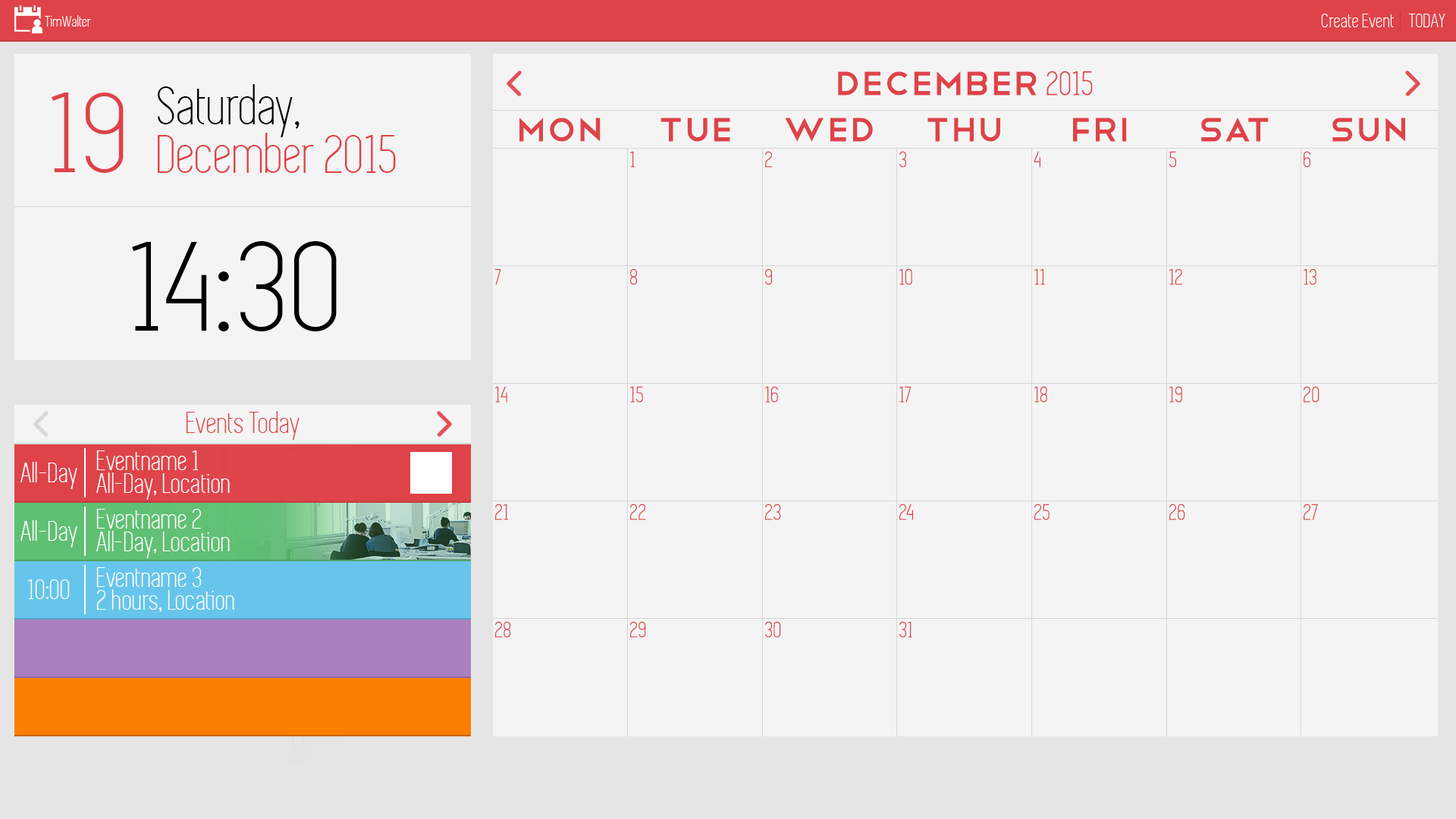
<style>
.page{position:relative;width:1456px;height:819px;background:#f4f4f4}
.page>*{position:absolute;margin:0}
.t1{font:15.6px "Simplifica";letter-spacing:0.01em;color:#ffffff}
.t2{font:20.5px "Simplifica";letter-spacing:0.01em;color:#ffffff}
.t3{font:43.6px "Telegrafico";letter-spacing:0.01em;color:#de4349}
.t4{font:35.1px "Simplifica";letter-spacing:0.01em;color:#de4349}
.t5{font:55.8px/48.5px "Simplifica";color:#de4349}
.t6{font:55.8px/48.5px "Simplifica";color:#000000}
.t7{font:117.9px "Simplifica";letter-spacing:0.01em;color:#de4349;scale:1.1 1}
.t8{font:22.9px "Simplifica";letter-spacing:0.01em;color:#de4349}
.t9{font:132.1px "Simplifica";letter-spacing:0.01em;color:#000000;scale:1.1 1}
.t10{font:30.9px "Simplifica";letter-spacing:0.01em;color:#de4349}
.t11{font:28.5px "Simplifica";letter-spacing:0.01em;color:#ffffff}
.t12{font:28.5px/23.1px "Simplifica";letter-spacing:0.01em;color:#ffffff}
</style>
<div class="page">
<p class="t1" style="left:45px;top:15px;width:46px;height:12px">TimWalter</p>
<p class="t2" style="left:1321px;top:14px;width:73px;height:13px">Create Event</p>
<p class="t2" style="left:1408px;top:14px;width:37px;height:13px">TODAY</p>
<p class="t3" style="left:838px;top:71px;width:255px;height:25px">December <span class="t4">2015</span></p>
<p class="t5" style="left:158px;top:84px;width:238px;height:89px"><span class="t6">Saturday,<br></span>December 2015</p>
<p class="t7" style="left:52px;top:93px;width:72px;height:80px">19</p>
<p class="t3" style="left:519px;top:118px;width:82px;height:24px">MON</p>
<p class="t3" style="left:660px;top:118px;width:70px;height:24px">TUE</p>
<p class="t3" style="left:785px;top:118px;width:88px;height:24px">WED</p>
<p class="t3" style="left:927px;top:118px;width:73px;height:24px">THU</p>
<p class="t3" style="left:1073px;top:118px;width:54px;height:24px">FRI</p>
<p class="t3" style="left:1201px;top:118px;width:68px;height:24px">SAT</p>
<p class="t3" style="left:1332px;top:118px;width:73px;height:24px">SUN</p>
<p class="t8" style="left:630px;top:151px;width:5px;height:17px">1</p>
<p class="t8" style="left:765px;top:151px;width:7px;height:17px">2</p>
<p class="t8" style="left:899px;top:151px;width:7px;height:17px">3</p>
<p class="t8" style="left:1034px;top:151px;width:6px;height:17px">4</p>
<p class="t8" style="left:1169px;top:151px;width:7px;height:17px">5</p>
<p class="t8" style="left:1304px;top:151px;width:6px;height:17px">6</p>
<p class="t9" style="left:132px;top:241px;width:205px;height:90px">14:30</p>
<p class="t8" style="left:494px;top:268px;width:7px;height:17px">7</p>
<p class="t8" style="left:630px;top:268px;width:7px;height:17px">8</p>
<p class="t8" style="left:765px;top:268px;width:7px;height:17px">9</p>
<p class="t8" style="left:899px;top:268px;width:13px;height:17px">10</p>
<p class="t8" style="left:1034px;top:268px;width:11px;height:17px">11</p>
<p class="t8" style="left:1169px;top:268px;width:13px;height:17px">12</p>
<p class="t8" style="left:1304px;top:268px;width:12px;height:17px">13</p>
<p class="t8" style="left:495px;top:386px;width:12px;height:17px">14</p>
<p class="t8" style="left:630px;top:386px;width:13px;height:17px">15</p>
<p class="t8" style="left:765px;top:386px;width:13px;height:17px">16</p>
<p class="t8" style="left:899px;top:386px;width:12px;height:17px">17</p>
<p class="t8" style="left:1034px;top:386px;width:13px;height:17px">18</p>
<p class="t8" style="left:1169px;top:386px;width:13px;height:17px">19</p>
<p class="t8" style="left:1304px;top:386px;width:15px;height:17px">20</p>
<p class="t10" style="left:186px;top:411px;width:114px;height:29px">Events Today</p>
<p class="t11" style="left:20px;top:462px;width:57px;height:27px">All-Day</p>
<p class="t12" style="left:96px;top:450px;width:134px;height:50px">Eventname 1<br>All-Day, Location</p>
<p class="t12" style="left:96px;top:509px;width:134px;height:49px">Eventname 2<br>All-Day, Location</p>
<p class="t8" style="left:495px;top:504px;width:13px;height:16px">21</p>
<p class="t8" style="left:630px;top:504px;width:16px;height:16px">22</p>
<p class="t8" style="left:765px;top:504px;width:16px;height:16px">23</p>
<p class="t8" style="left:899px;top:504px;width:14px;height:16px">24</p>
<p class="t8" style="left:1034px;top:504px;width:16px;height:16px">25</p>
<p class="t8" style="left:1169px;top:504px;width:16px;height:16px">26</p>
<p class="t8" style="left:1304px;top:504px;width:14px;height:16px">27</p>
<p class="t11" style="left:20px;top:520px;width:57px;height:28px">All-Day</p>
<p class="t12" style="left:96px;top:567px;width:138px;height:45px">Eventname 3<br>2 hours, Location</p>
<p class="t11" style="left:27px;top:579px;width:43px;height:20px">10:00</p>
<p class="t8" style="left:495px;top:621px;width:16px;height:17px">28</p>
<p class="t8" style="left:630px;top:621px;width:16px;height:17px">29</p>
<p class="t8" style="left:765px;top:621px;width:16px;height:17px">30</p>
<p class="t8" style="left:899px;top:621px;width:13px;height:17px">31</p>
</div>
